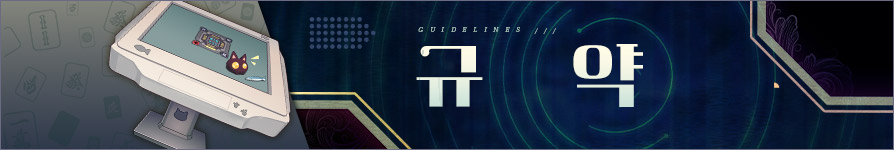
<style>
.page{position:relative;width:894px;height:150px}
.page>*{position:absolute;margin:0}
.t1{font:76.7px "Cafe24ClassicType-Regular";letter-spacing:1.2em;color:#fffbe7;scale:0.93 1}
</style>
<div class="page">
<p class="t1" style="left:416px;top:44px;width:227px;height:63px">규약</p>
</div>
